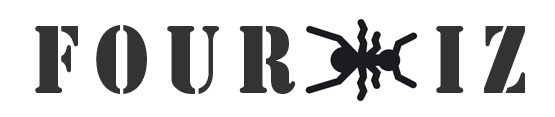
<style>
.page{position:relative;width:555px;height:117px;background:#ffffff}
.page>*{position:absolute;margin:0}
.t1{font:89.3px "StencilStd";letter-spacing:0.2em;color:#333333;scale:0.85 1}
</style>
<div class="page">
<p class="t1" style="left:35px;top:25px;width:490px;height:69px">Four   iZ</p>
</div>
